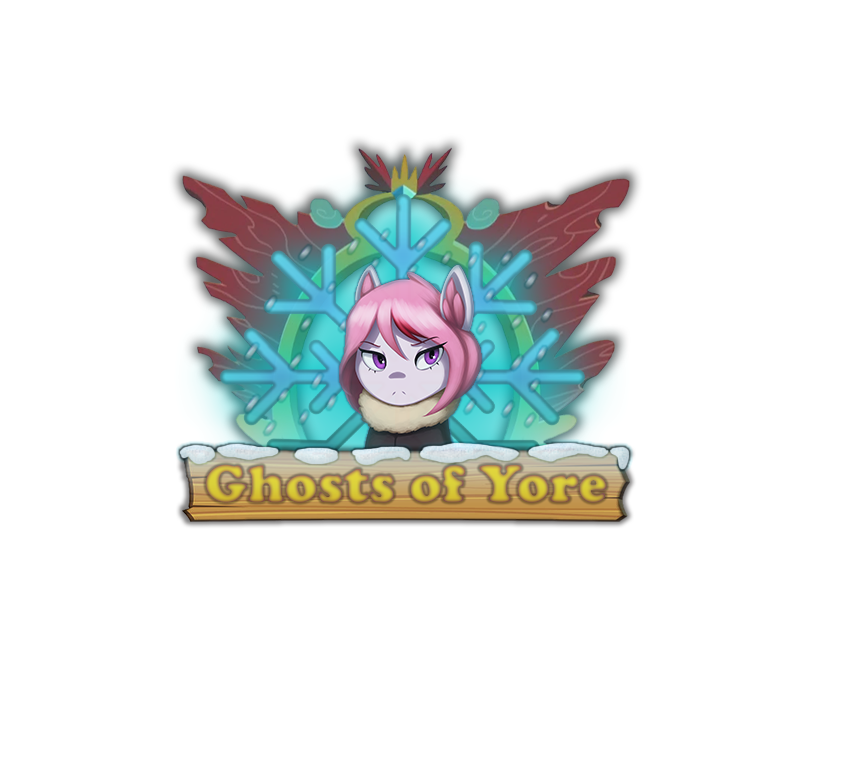
<style>
.page{position:relative;width:856px;height:770px;background:#ffffff}
.page>*{position:absolute;margin:0}
.t1{font:54px "CooperBlack";letter-spacing:0.007em}
</style>
<div class="page">
<p class="t1" style="left:205px;top:464px;width:402px;height:39px">Ghosts of Yore</p>
</div>
